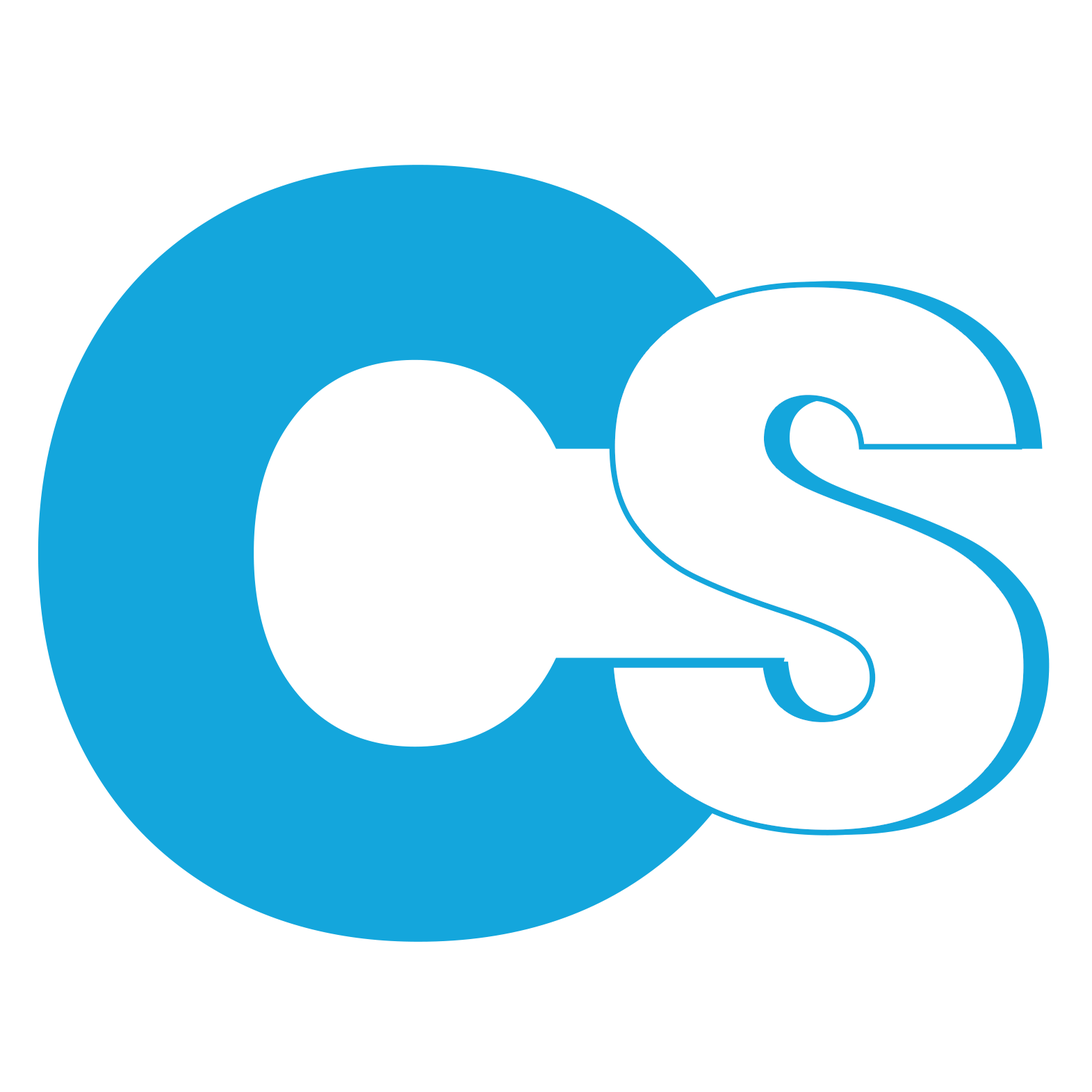
<style>
.page{position:relative;width:1092px;height:1092px;background:#ffffff}
.page>*{position:absolute;margin:0}
.t1{font:1083.5px "Poppins-ExtraBold";color:#14a6dc}
</style>
<div class="page">
<p class="t1" style="left:38px;top:165px;width:747px;height:777px">C</p>
</div>
